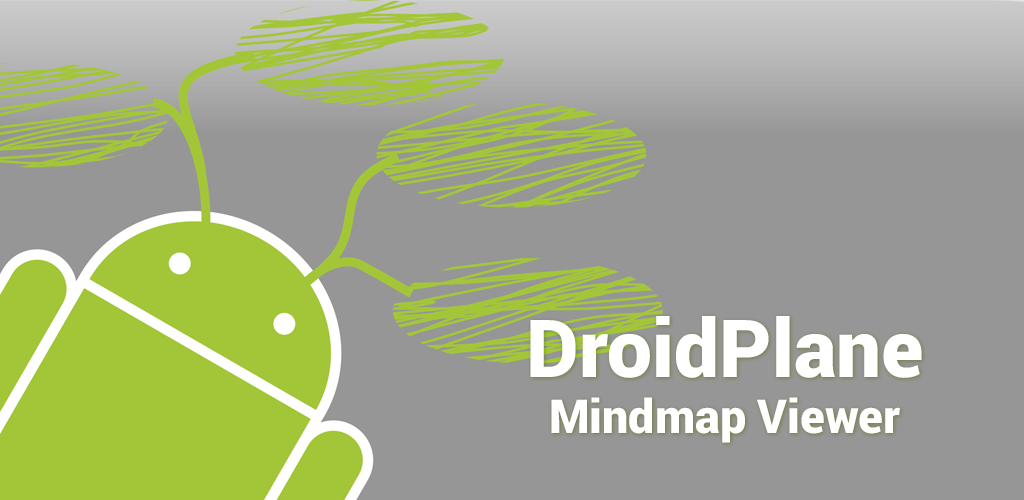
<style>
.page{position:relative;width:1024px;height:500px;background:#969696}
.page>*{position:absolute;margin:0}
.t1{font:46.7px "Roboto-Black";color:#ffffff}
.t2{font:80px "Roboto-Black";color:#ffffff}
</style>
<div class="page">
<p class="t1" style="left:530px;top:316px;width:392px;height:127px;text-align:center"><span class="t2">DroidPlane<br></span>Mindmap Viewer</p>
</div>
